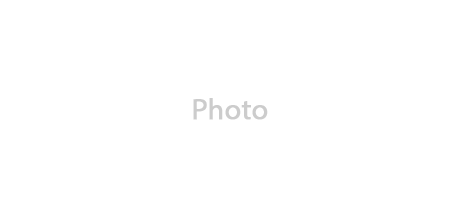
<style>
.page{position:relative;width:460px;height:218px;background:#ffffff}
.page>*{position:absolute;margin:0}
.t1{font:29.2px "MyriadPro-Regular";color:#cccccc;font-weight:bold}
</style>
<div class="page">
<p class="t1" style="left:193px;top:98px;width:75px;height:22px">Photo</p>
</div>
